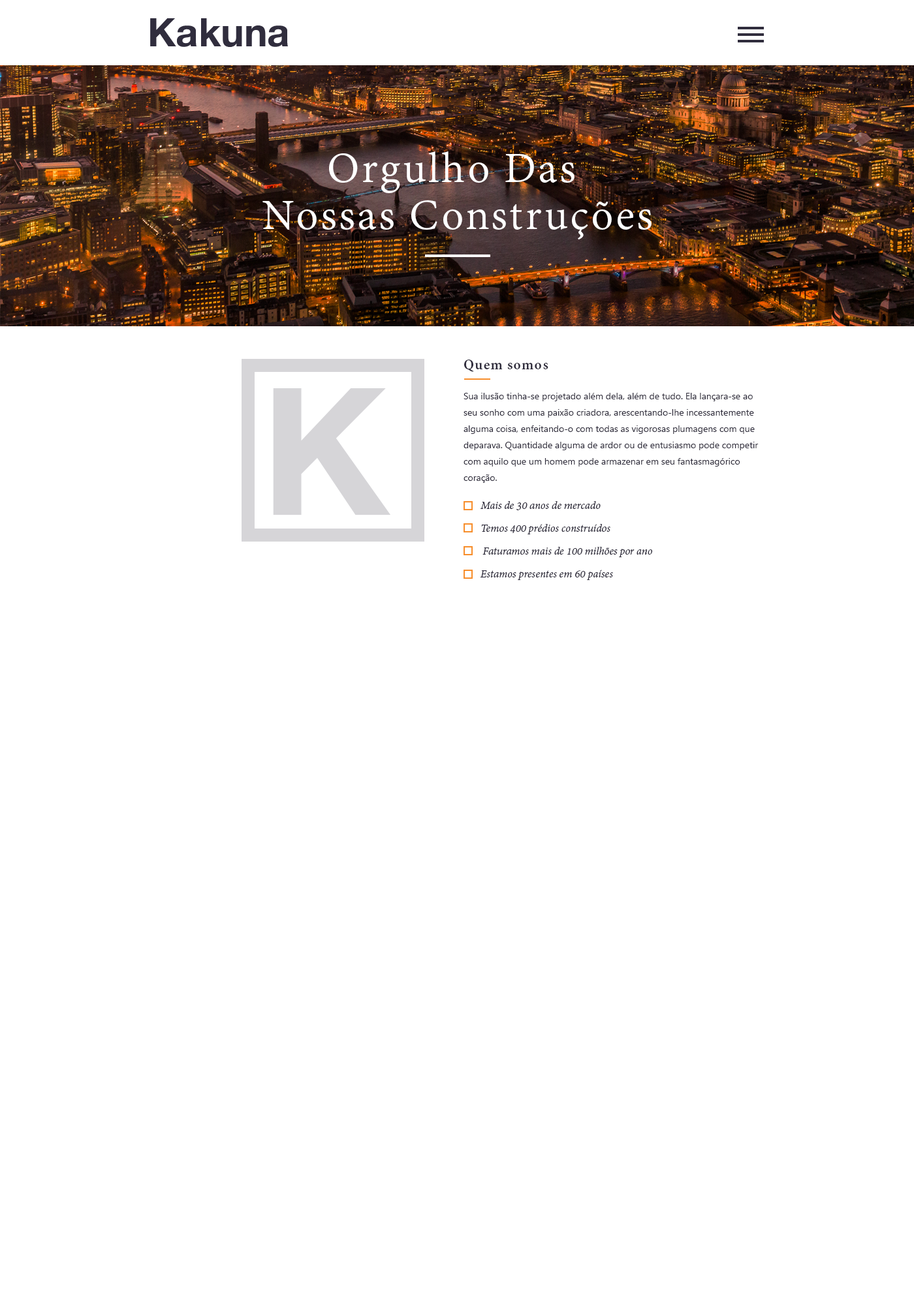
<style>
.page{position:relative;width:914px;height:1305px;background:#ffffff}
.page>*{position:absolute;margin:0}
.t1{font:47px/47px "AdobeDevanagari-Regular";letter-spacing:0.05em;color:#ffffff}
.t2{font:15.7px "AdobeDevanagari-Bold";letter-spacing:0.05em;color:#302d3d}
.t3{font:9.1px/16.3px "MyanmarText";color:#302d3d}
.t4{font:11.7px/22.8px "AdobeDevanagari-Italic";color:#302d3d}
</style>
<div class="page">
<p class="t1" style="left:262px;top:151px;width:389px;height:88px;text-align:center">Orgulho Das <br>Nossas Construções</p>
<p class="t2" style="left:463px;top:360px;width:85px;height:12px">Quem somos</p>
<p class="t3" style="left:463px;top:393px;width:295px;height:90px">Sua ilusão tinha-se projetado além dela, além de tudo. Ela lançara-se ao seu sonho com uma paixão criadora, arescentando-lhe incessantemente alguma coisa, enfeitando-o com todas as vigorosas plumagens com que deparava. Quantidade alguma de ardor ou de entusiasmo pode competir com aquilo que um homem pode armazenar em seu fantasmagórico coração.</p>
<p class="t4" style="left:480px;top:501px;width:172px;height:79px">Mais de 30 anos de mercado<br>Temos 400 prédios construídos<br> Faturamos mais de 100 milhões por ano<br>Estamos presentes em 60 países</p>
</div>
